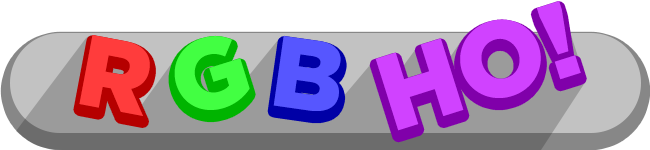
<style>
.page{position:relative;width:650px;height:150px;background:#ffffff}
.page>*{position:absolute;margin:0}
.t1{font:106.7px "GothamPro-Black";color:#d042ff}
.t2{font:100px "GothamPro-Black";color:#ff3c3c}
.t3{font:100px "GothamPro-Black";color:#42ff42}
.t4{font:100px "GothamPro-Black";color:#5656ff}
</style>
<div class="page">
<p class="t1" style="left:375px;top:1px;width:206px;height:130px;rotate:-17deg">HO!</p>
<p class="t2" style="left:79px;top:35px;width:71px;height:81px;rotate:11deg">R</p>
<p class="t3" style="left:174px;top:36px;width:76px;height:74px;rotate:-17deg">G</p>
<p class="t4" style="left:273px;top:36px;width:68px;height:75px;rotate:8deg">B</p>
</div>
